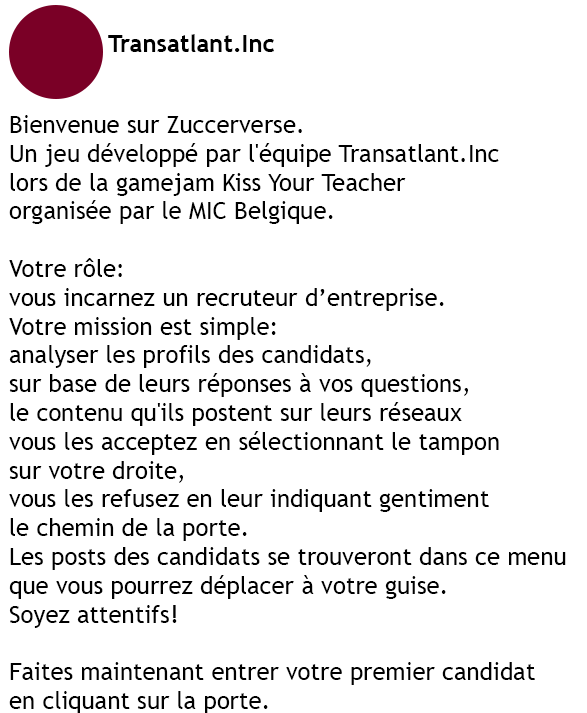
<style>
.page{position:relative;width:587px;height:713px;background:#ffffff}
.page>*{position:absolute;margin:0}
.t1{font:24px "TrebuchetMS-Bold";color:#000000}
.t2{font:24px "TrebuchetMS";color:#000000}
</style>
<div class="page">
<p class="t1" style="left:108px;top:34px;width:166px;height:18px">Transatlant.Inc</p>
<p class="t2" style="left:9px;top:115px;width:557px;height:599px">Bienvenue sur Zuccerverse.<br>Un jeu développé par l'équipe Transatlant.Inc <br>lors de la gamejam Kiss Your Teacher <br>organisée par le MIC Belgique.<br><br>Votre rôle: <br>vous incarnez un recruteur d’entreprise.<br>Votre mission est simple: <br>analyser les profils des candidats, <br>sur base de leurs réponses à vos questions,<br>le contenu qu'ils postent sur leurs réseaux <br>vous les acceptez en sélectionnant le tampon <br>sur votre droite,<br>vous les refusez en leur indiquant gentiment<br>le chemin de la porte.<br>Les posts des candidats se trouveront dans ce menu <br>que vous pourrez déplacer à votre guise.<br>Soyez attentifs!<br><br>Faites maintenant entrer votre premier candidat <br>en cliquant sur la porte.</p>
</div>
